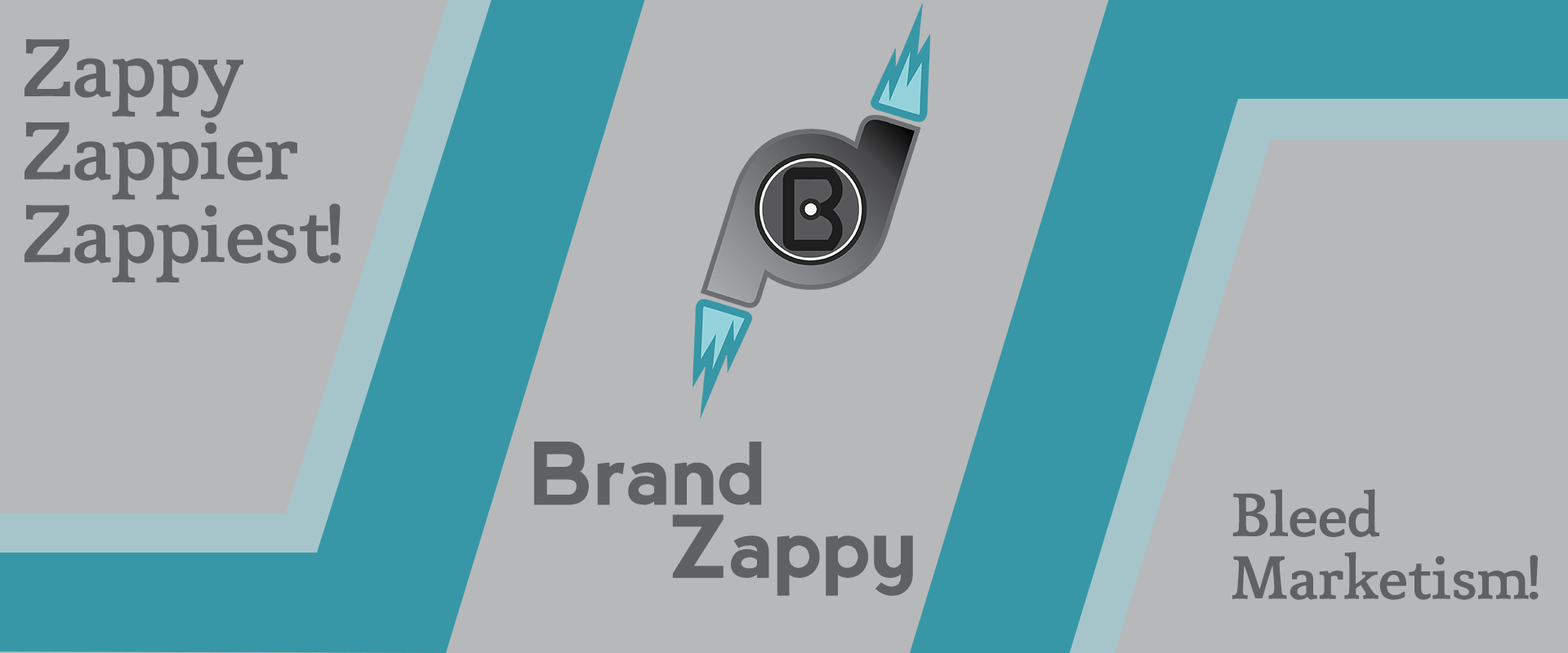
<style>
.page{position:relative;width:1568px;height:653px;background:#b7b8ba}
.page>*{position:absolute;margin:0}
.t1{font:81.7px/83px "Mido-Medium";letter-spacing:-0.02em;color:#606163}
.t2{font:86.1px/73.2px "nevis-Bold";letter-spacing:-0.02em;color:#606163}
.t3{font:61.2px/62.6px "Mido-Medium";letter-spacing:-0.02em;color:#606163}
</style>
<div class="page">
<p class="t1" style="left:24px;top:39px;width:317px;height:244px">Zappy<br>Zappier<br>Zappiest!</p>
<p class="t2" style="left:534px;top:442px;width:379px;height:154px">Brand<br>     Zappy</p>
<p class="t3" style="left:1232px;top:489px;width:307px;height:111px">Bleed<br>Marketism!</p>
</div>
